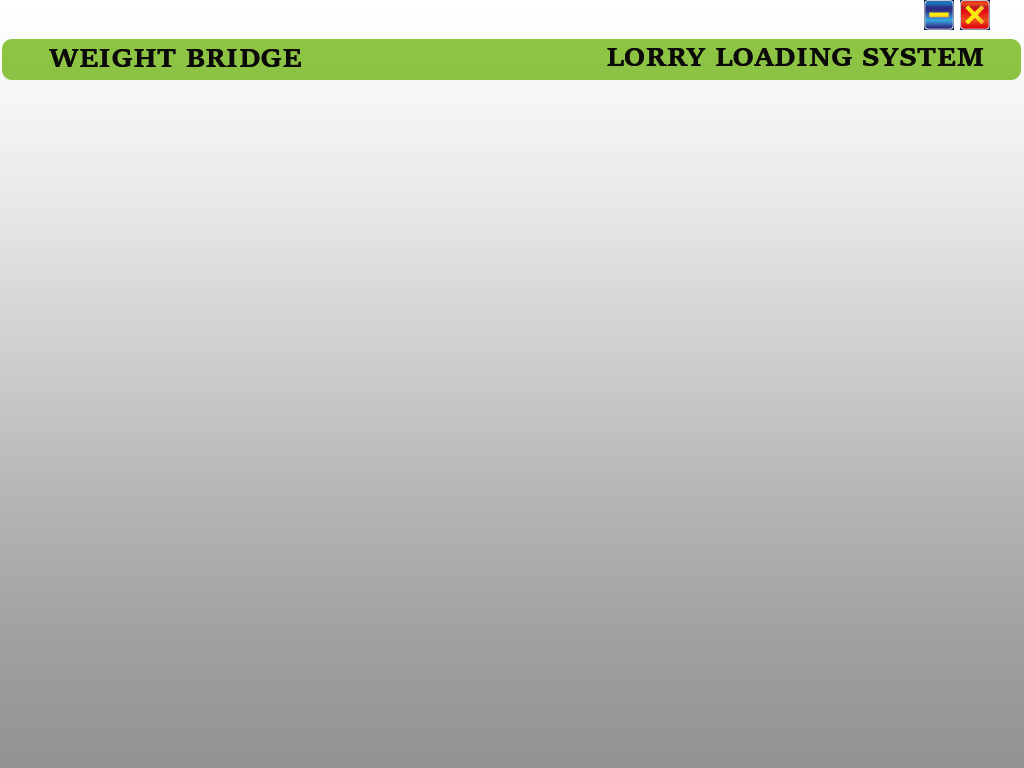
<style>
.page{position:relative;width:1024px;height:768px}
.page>*{position:absolute;margin:0}
.t1{font:27.6px "SitkaSmall-Bold";color:#0c0909}
</style>
<div class="page">
<p class="t1" style="left:49px;top:49px;width:252px;height:18px">WEIGHT BRIDGE</p>
<p class="t1" style="left:607px;top:48px;width:377px;height:18px">LORRY LOADING SYSTEM</p>
</div>
